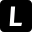
<style>
.page{position:relative;width:32px;height:32px;background:#000000}
.page>*{position:absolute;margin:0}
.t1{font:32px "AncizarSans-BoldItalic";color:#ffffff}
</style>
<div class="page">
<p class="t1" style="left:9px;top:6px;width:14px;height:20px">L</p>
</div>
